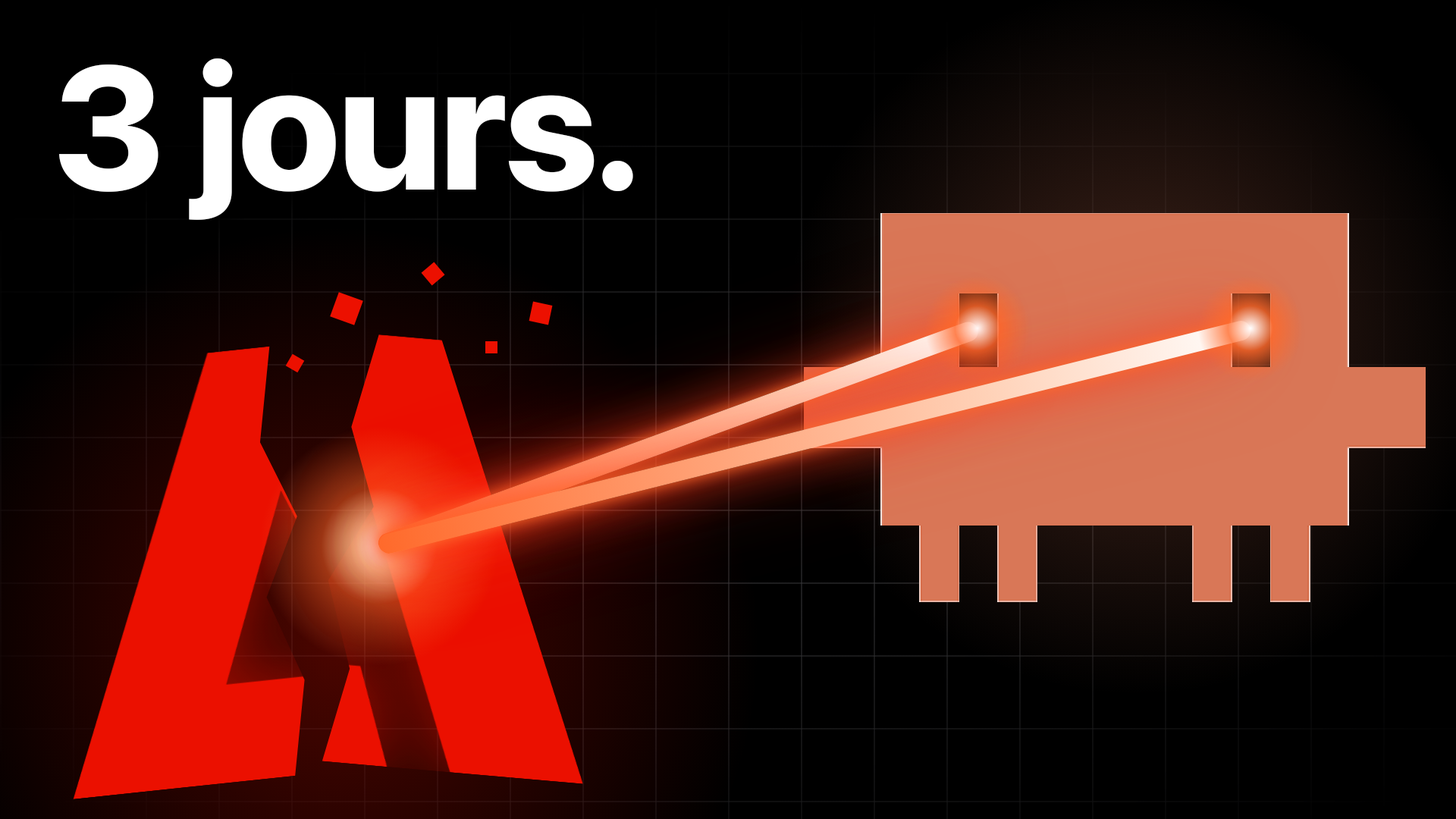
<style>
.page{position:relative;width:1456px;height:819px;background:#000000}
.page>*{position:absolute;margin:0}
.t1{font:174.4px ".SFNS-Regular";letter-spacing:-0.01em;color:#ffffff}
</style>
<div class="page">
<p class="t1" style="left:58px;top:58px;width:576px;height:163px">3 jours.</p>
</div>
